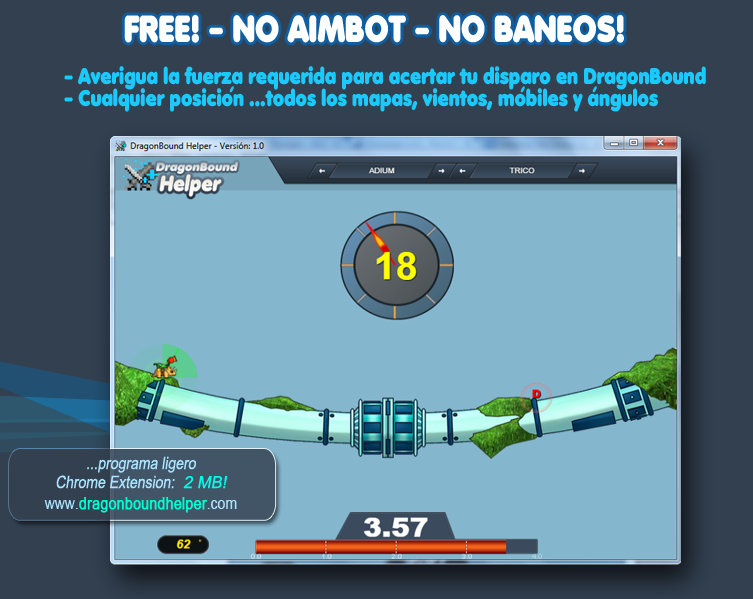
<style>
.page{position:relative;width:753px;height:599px;background:#84b6ce}
.page>*{position:absolute;margin:0}
.t1{font:36.6px "Anja-Eliane-Nornal";color:#feffff;scale:0.82 1}
.t2{font:22px "Anja-Eliane-Nornal";color:#1acafd;scale:0.82 1}
.t3{font:14.6px "Anja-Eliane-Nornal";color:#1acafd;font-style:italic;scale:0.82 1}
.t4{font:17.1px/19px "ArialMT";color:#abe4ff;font-style:italic;scale:0.82 1}
.t5{font:16.5px/19px "ArialMT";color:#00ffea;font-style:italic}
.t6{font:17.1px "ArialMT";color:#00ffd2;font-weight:bold;scale:0.82 1}
.t7{font:22px "ArialMT";color:#abe4ff;scale:0.82 1}
.t8{font:17.1px "ArialMT";color:#abe4ff;scale:0.82 1}
</style>
<div class="page">
<p class="t1" style="left:124px;top:14px;width:500px;height:29px">FREE! - NO AIMBOT - NO BANEOS!</p>
<p class="t2" style="left:64px;top:66px;width:642px;height:46px">- Averigua la fuerza requerida para acertar tu disparo en DragonBound<br>- Cualquier posicion ...todos los mapas, vientos, mobiles y angulos</p>
<p class="t3" style="left:229px;top:86px;width:5px;height:7px;rotate:180deg">,</p>
<p class="t3" style="left:520px;top:86px;width:5px;height:7px;rotate:180deg">,</p>
<p class="t3" style="left:592px;top:86px;width:5px;height:7px;rotate:180deg">,</p>
<p class="t4" style="left:56px;top:456px;width:172px;height:33px;text-align:center">...programa ligero<br>Chrome Extension:  <span class="t5">2 MB!</span></p>
<p class="t6" style="left:44px;top:497px;width:193px;height:16px"><span class="t7"><br></span><span class="t8">www.</span>dragonboundhelper<span class="t8">.com</span></p>
</div>
